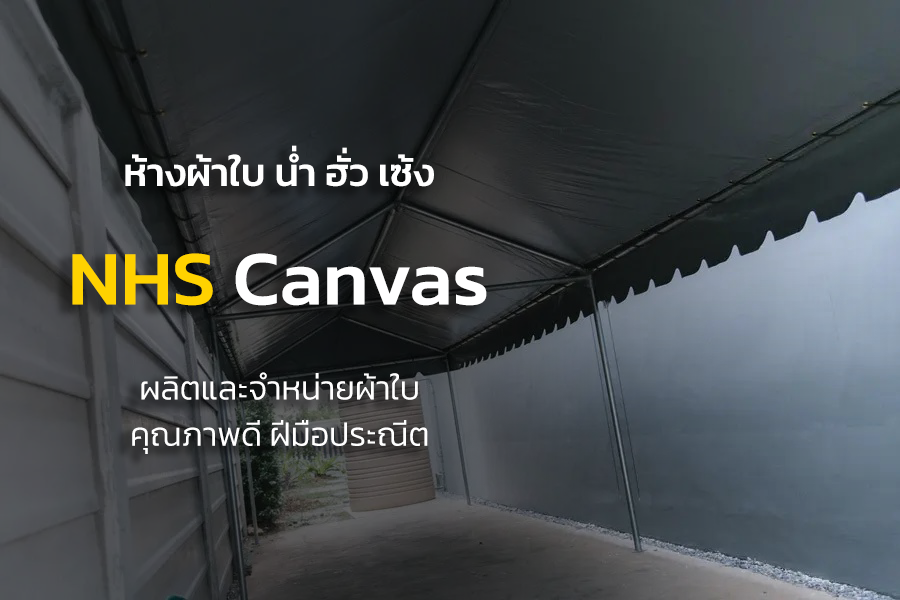
<style>
.page{position:relative;width:900px;height:600px}
.page>*{position:absolute;margin:0}
.t1{font:39.6px "Kanit-Medium";color:#ffffff}
.t2{font:78.1px "Kanit-Medium";color:#ffffff}
.t3{font:78.1px "Kanit-Medium";color:#ffd200}
.t4{font:33.1px "Kanit-Light";color:#ffffff}
</style>
<div class="page">
<p class="t1" style="left:125px;top:145px;width:309px;height:42px">ห้างผ้าใบ น่ำ ฮั่ว เซ้ง</p>
<p class="t2" style="left:72px;top:253px;width:415px;height:53px"><span class="t3">NHS</span> Canvas</p>
<p class="t4" style="left:132px;top:372px;width:296px;height:82px;text-align:center">ผลิตและจำหน่ายผ้าใบ<br><br>คุณภาพดี ฝีมือประณีต</p>
</div>
